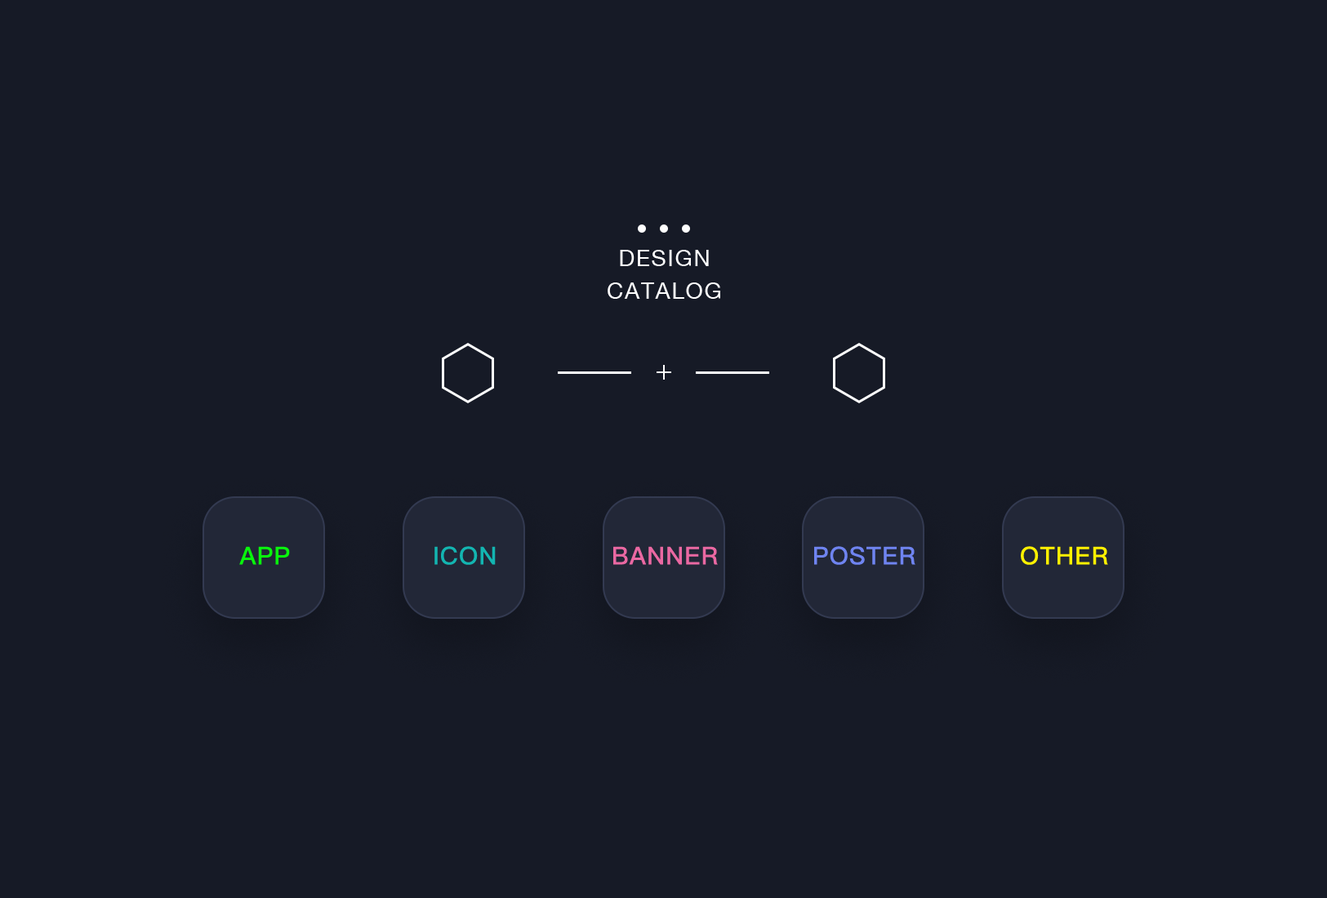
<style>
.page{position:relative;width:1327px;height:898px;background:#161a26}
.page>*{position:absolute;margin:0}
.t1{font:22.9px/32.7px "HelveticaNeue";letter-spacing:0.06em;color:#ffffff}
.t2{font:24.5px "PingFang-SC-Bold";letter-spacing:0.04em;color:#08f70c}
.t3{font:24.5px "PingFang-SC-Bold";letter-spacing:0.04em;color:#13b5b1}
.t4{font:24.5px "PingFang-SC-Bold";letter-spacing:0.04em;color:#ea68a2;text-transform:uppercase}
.t5{font:24.5px "PingFang-SC-Bold";letter-spacing:0.04em;color:#6f84f1;text-transform:uppercase}
.t6{font:24.5px "PingFang-SC-Bold";letter-spacing:0.04em;color:#fff100;text-transform:uppercase}
</style>
<div class="page">
<p class="t1" style="left:608px;top:250px;width:112px;height:49px;text-align:center">DESIGN<br>CATALOG</p>
<p class="t2" style="left:239px;top:546px;width:51px;height:19px">APP</p>
<p class="t3" style="left:435px;top:546px;width:61px;height:19px">ICON</p>
<p class="t4" style="left:613px;top:546px;width:105px;height:19px">banner</p>
<p class="t5" style="left:814px;top:546px;width:102px;height:19px">poster</p>
<p class="t6" style="left:1021px;top:546px;width:87px;height:19px">Other</p>
</div>
